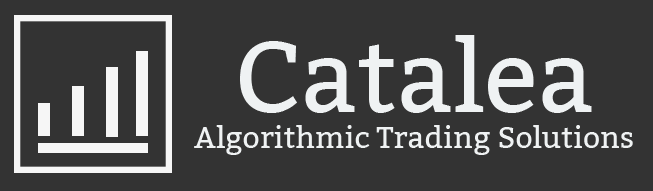
<style>
.page{position:relative;width:653px;height:191px;background:#333333}
.page>*{position:absolute;margin:0}
.t1{font:30px "Kadwa-Regular";color:#eff2f3}
.t2{font:100px "Kadwa-Regular";color:#eff2f3}
</style>
<div class="page">
<p class="t1" style="left:194px;top:35px;width:439px;height:120px;text-align:center"><span class="t2">Catalea<br></span>Algorithmic Trading Solutions</p>
</div>
